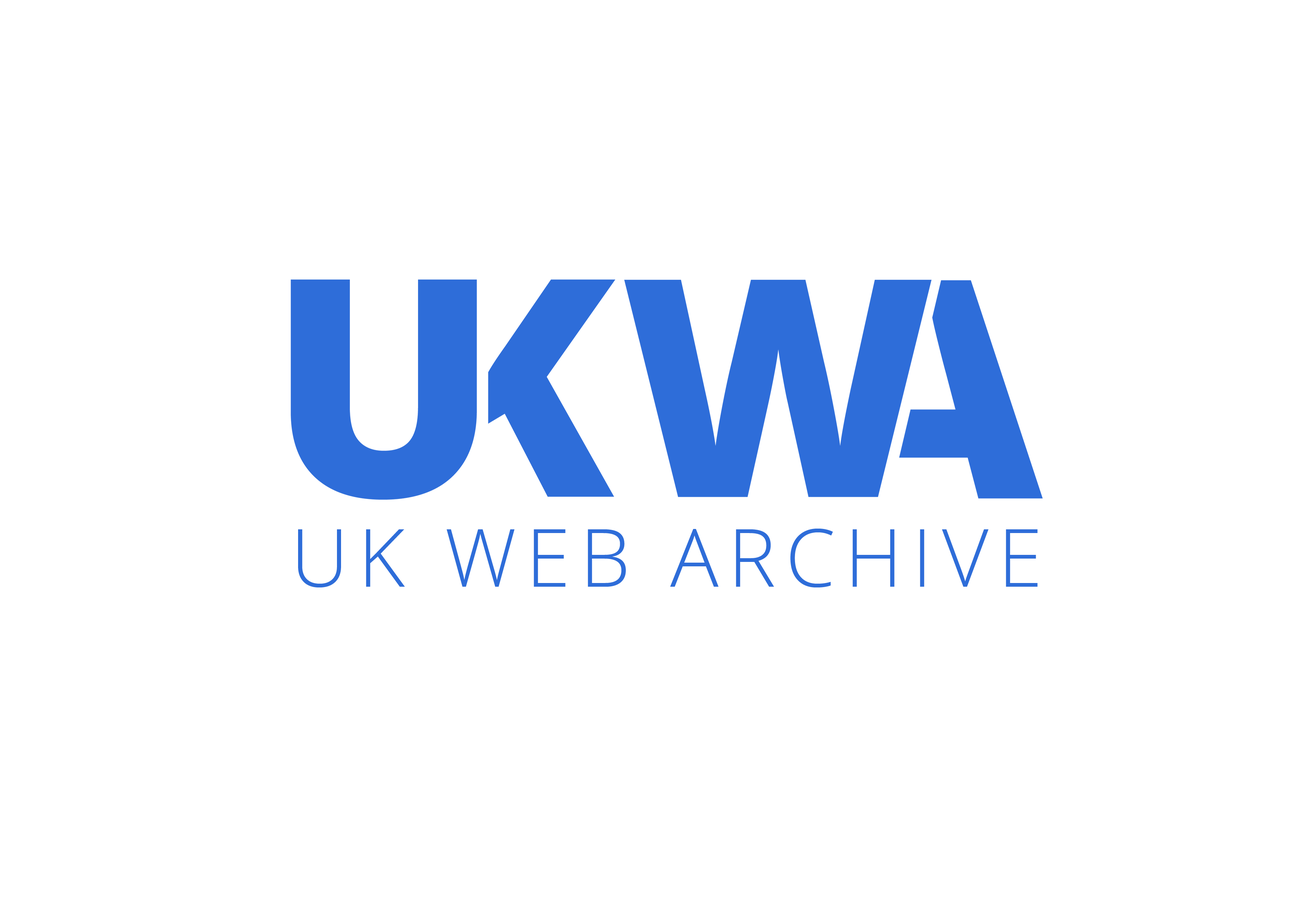
<style>
.page{position:relative;width:1299px;height:918px;background:#ffffff}
.page>*{position:absolute;margin:0}
.t1{font:80.2px "OpenSans-Light";letter-spacing:0.12em;color:#2e6dd9}
</style>
<div class="page">
<p class="t1" style="left:298px;top:529px;width:739px;height:59px">UK WEB ARCHIVE</p>
</div>
